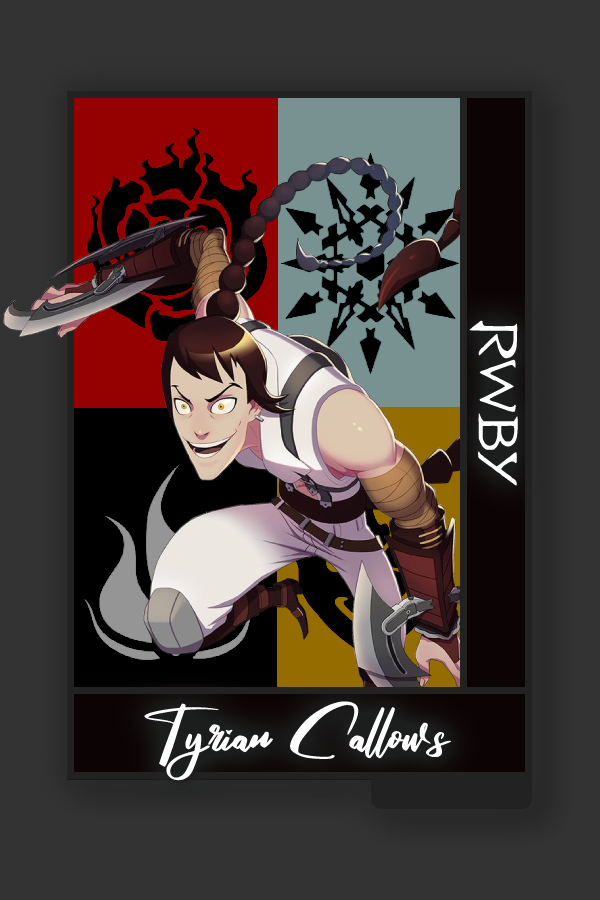
<style>
.page{position:relative;width:600px;height:900px;background:#333333}
.page>*{position:absolute;margin:0}
.t1{font:61.3px "RWBY_Style";color:#ffffff;scale:1.25 1}
.t2{font:76.6px "RosegaFREE";color:#ffffff;scale:0.91 1}
</style>
<div class="page">
<p class="t1" style="left:469px;top:320px;width:49px;height:166px;rotate:90deg">RWBY</p>
<p class="t2" style="left:143px;top:701px;width:309px;height:85px">Tyrian Callows</p>
</div>
